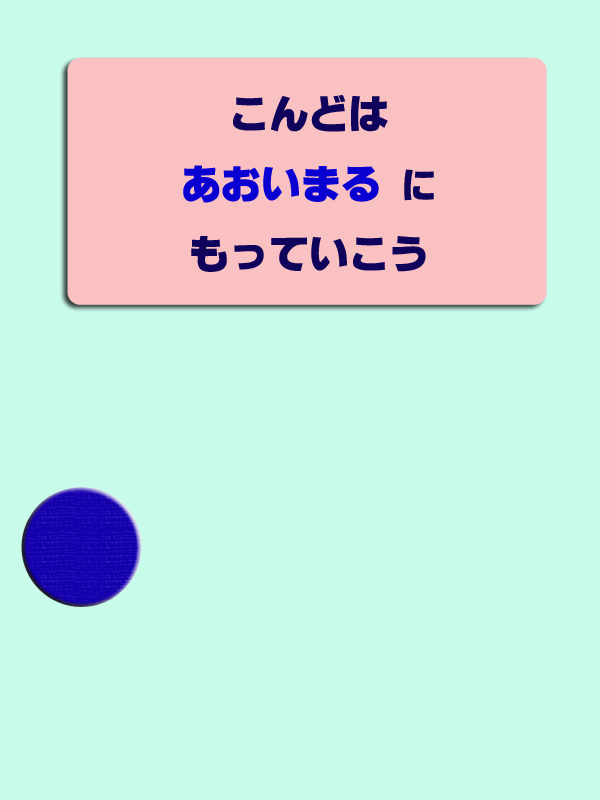
<style>
.page{position:relative;width:600px;height:800px;background:#c8fbea}
.page>*{position:absolute;margin:0}
.t1{font:40px "ÓÝSVbN";color:#0f035b}
.t2{font:40px "ÓÝSVbN";color:#0a00d2}
.t3{font:36px "ÓÝSVbN";color:#0f035b}
</style>
<div class="page">
<p class="t1" style="left:183px;top:95px;width:251px;height:177px;text-align:center">こんどは<br><span class="t2">あおいまる </span><span class="t3">に<br></span>もっていこう</p>
</div>
